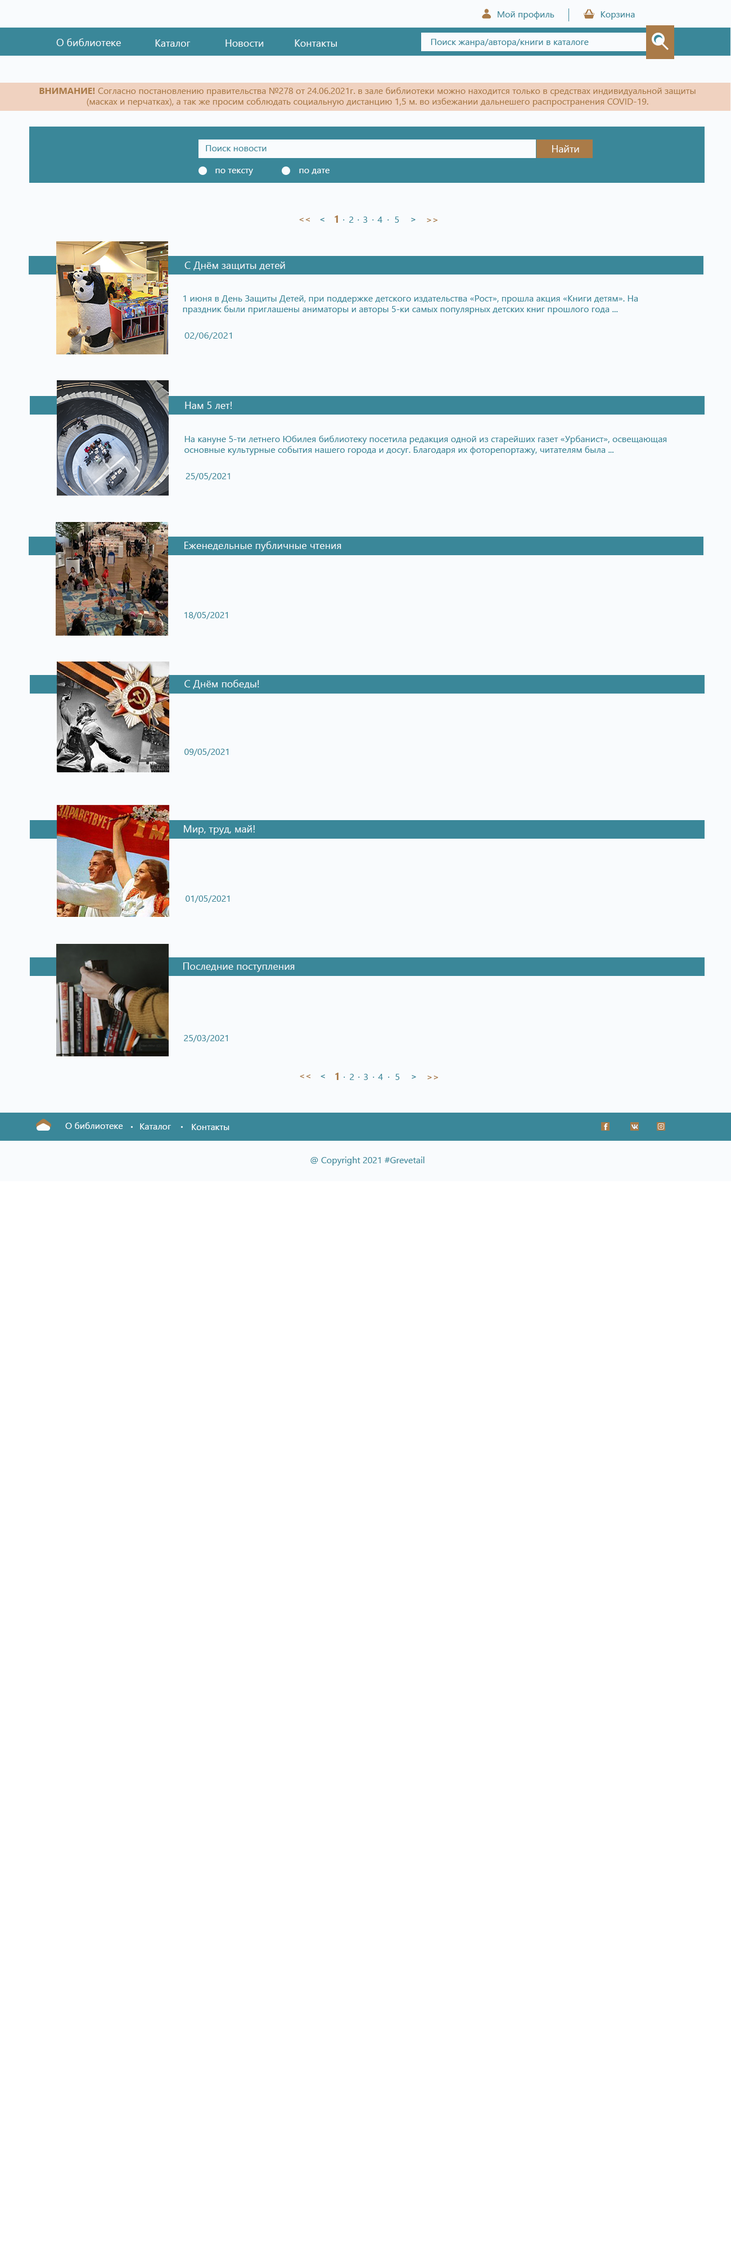
<style>
.page{position:relative;width:731px;height:2250px;background:#ffffff}
.page>*{position:absolute;margin:0}
.t1{font:9px "SegoeUI";color:#3a8799}
.t2{font:10.1px "SegoeUI";color:#f9fbfd}
.t3{font:9px "SegoeUI";color:#aa7b48}
.t4{font:9px "SegoeUI-Bold";color:#aa7b48}
.t5{font:9px "SegoeUI";color:#f9fbfd}
.t6{font:9px "SegoeUI-Bold";color:#3a8799}
.t7{font:10.1px "SegoeUI-Bold";color:#aa7b48}
.t8{font:9px "SegoeUI";color:#3a8799;scale:1.07 1}
.t9{font:10.1px "SegoeUI-Bold";color:#f9fbfd}
.t10{font:9px "SegoeUI-Bold";color:#f9fbfd}
</style>
<div class="page">
<p class="t1" style="left:498px;top:11px;width:57px;height:9px">Мой профиль</p>
<p class="t1" style="left:601px;top:11px;width:34px;height:9px">Корзина</p>
<p class="t2" style="left:56px;top:38px;width:65px;height:8px">О библиотеке</p>
<p class="t2" style="left:155px;top:39px;width:36px;height:8px">Каталог</p>
<p class="t2" style="left:226px;top:39px;width:38px;height:8px">Новости</p>
<p class="t2" style="left:295px;top:39px;width:42px;height:8px">Контакты</p>
<p class="t1" style="left:431px;top:39px;width:158px;height:8px">Поиск жанра/автора/книги в каталоге</p>
<p class="t3" style="left:39px;top:87px;width:657px;height:20px;text-align:center"><span class="t4">ВНИМАНИЕ! </span>Согласно постановлению правительства №278 от 24.06.2021г. в зале библиотеки можно находится только в средствах индивидуальной защиты (масках и перчатках), а так же просим соблюдать социальную дистанцию 1,5 м. во избежании дальнешего распространения COVID-19.</p>
<p class="t1" style="left:206px;top:145px;width:61px;height:6px">Поиск новости</p>
<p class="t2" style="left:552px;top:145px;width:27px;height:7px">Найти</p>
<p class="t5" style="left:215px;top:169px;width:38px;height:7px">по тексту</p>
<p class="t5" style="left:299px;top:169px;width:31px;height:5px">по дате</p>
<p class="t4" style="left:299px;top:218px;width:11px;height:4px">&lt;&lt;</p>
<p class="t6" style="left:320px;top:218px;width:5px;height:4px">&lt;</p>
<p class="t7" style="left:335px;top:215px;width:3px;height:8px">1</p>
<p class="t1" style="left:343px;top:219px;width:2px;height:1px">.</p>
<p class="t1" style="left:349px;top:217px;width:5px;height:6px">2</p>
<p class="t1" style="left:358px;top:219px;width:1px;height:1px">.</p>
<p class="t1" style="left:363px;top:217px;width:4px;height:6px">3</p>
<p class="t1" style="left:372px;top:219px;width:2px;height:1px">.</p>
<p class="t1" style="left:377px;top:217px;width:5px;height:6px">4</p>
<p class="t1" style="left:388px;top:219px;width:1px;height:1px">.</p>
<p class="t1" style="left:395px;top:217px;width:4px;height:6px">5</p>
<p class="t6" style="left:411px;top:218px;width:5px;height:4px">&gt;</p>
<p class="t4" style="left:427px;top:218px;width:11px;height:4px">&gt;&gt;</p>
<p class="t2" style="left:184px;top:262px;width:101px;height:9px">С Днём защиты детей</p>
<p class="t1" style="left:183px;top:295px;width:455px;height:19px">1 июня в День Защиты Детей, при поддержке детского издательства «Рост», прошла акция «Книги детям». На праздник были приглашены аниматоры и авторы 5-ки самых популярных детских книг прошлого года ...</p>
<p class="t8" style="left:184px;top:332px;width:48px;height:8px">02/06/2021</p>
<p class="t2" style="left:185px;top:402px;width:47px;height:7px">Нам 5 лет!</p>
<p class="t1" style="left:184px;top:435px;width:483px;height:20px">На кануне 5-ти летнего Юбилея библиотеку посетила редакция одной из старейших газет «Урбанист», освещающая основные культурные события нашего города и досуг. Благодаря их фоторепортажу, читателям была ...</p>
<p class="t1" style="left:186px;top:473px;width:44px;height:7px">25/05/2021</p>
<p class="t2" style="left:184px;top:541px;width:157px;height:10px">Еженедельные публичные чтения</p>
<p class="t1" style="left:184px;top:612px;width:44px;height:7px">18/05/2021</p>
<p class="t2" style="left:184px;top:680px;width:75px;height:9px">С Днём победы!</p>
<p class="t1" style="left:184px;top:749px;width:44px;height:7px">09/05/2021</p>
<p class="t2" style="left:184px;top:825px;width:71px;height:10px">Мир, труд, май!</p>
<p class="t1" style="left:186px;top:896px;width:44px;height:7px">01/05/2021</p>
<p class="t2" style="left:183px;top:962px;width:112px;height:10px">Последние поступления</p>
<p class="t1" style="left:184px;top:1035px;width:44px;height:7px">25/03/2021</p>
<p class="t7" style="left:335px;top:1073px;width:4px;height:7px">1</p>
<p class="t1" style="left:350px;top:1074px;width:4px;height:6px">2</p>
<p class="t1" style="left:364px;top:1074px;width:4px;height:6px">3</p>
<p class="t1" style="left:378px;top:1074px;width:5px;height:6px">4</p>
<p class="t1" style="left:395px;top:1074px;width:5px;height:6px">5</p>
<p class="t4" style="left:300px;top:1074px;width:10px;height:4px">&lt;&lt;</p>
<p class="t6" style="left:321px;top:1074px;width:4px;height:4px">&lt;</p>
<p class="t1" style="left:344px;top:1077px;width:1px;height:1px">.</p>
<p class="t1" style="left:358px;top:1077px;width:2px;height:1px">.</p>
<p class="t1" style="left:373px;top:1077px;width:2px;height:1px">.</p>
<p class="t1" style="left:388px;top:1077px;width:2px;height:1px">.</p>
<p class="t6" style="left:412px;top:1075px;width:4px;height:4px">&gt;</p>
<p class="t4" style="left:428px;top:1076px;width:10px;height:3px">&gt;&gt;</p>
<p class="t5" style="left:65px;top:1122px;width:58px;height:7px">О библиотеке</p>
<p class="t9" style="left:130px;top:1126px;width:3px;height:2px">.</p>
<p class="t5" style="left:140px;top:1123px;width:31px;height:7px">Каталог</p>
<p class="t9" style="left:181px;top:1126px;width:2px;height:2px">.</p>
<p class="t5" style="left:192px;top:1124px;width:38px;height:6px">Контакты</p>
<p class="t10" style="left:604px;top:1123px;width:4px;height:7px">f</p>
<p class="t1" style="left:310px;top:1156px;width:115px;height:10px">@ Copyright 2021 #Grevetail</p>
</div>
